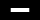
<style>
.page{position:relative;width:40px;height:20px;background:#000000}
.page>*{position:absolute;margin:0}
.t1{font:36px "Arial-Black";color:#ffffff;font-variant:small-caps}
</style>
<div class="page">
<p class="t1" style="left:10px;top:8px;width:20px;height:4px">–</p>
</div>
